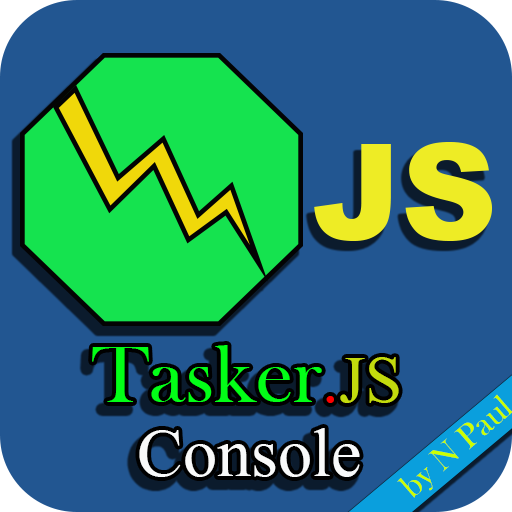
<style>
.page{position:relative;width:512px;height:512px;background:#225691}
.page>*{position:absolute;margin:0}
.t1{font:132.6px "Arial-Black";color:#eeec25}
.t2{font:83.3px "BaskOldFace";color:#02ff17}
.t3{font:83.3px "Aparajita";color:#ff0000}
.t4{font:83.3px "Aparajita";color:#c3db0d}
.t5{font:34.3px "BaskOldFace";color:#cbfe00}
.t6{font:85.1px "Aparajita";color:#f9fafa}
</style>
<div class="page">
<p class="t1" style="left:314px;top:142px;width:178px;height:99px">JS</p>
<p class="t2" style="left:92px;top:345px;width:307px;height:58px">Tasker<span class="t3">.</span><span class="t4">JS</span></p>
<p class="t5" style="left:397px;top:394px;width:117px;height:104px;rotate:-41deg">by N Paul</p>
<p class="t6" style="left:139px;top:428px;width:221px;height:49px">Console</p>
</div>
